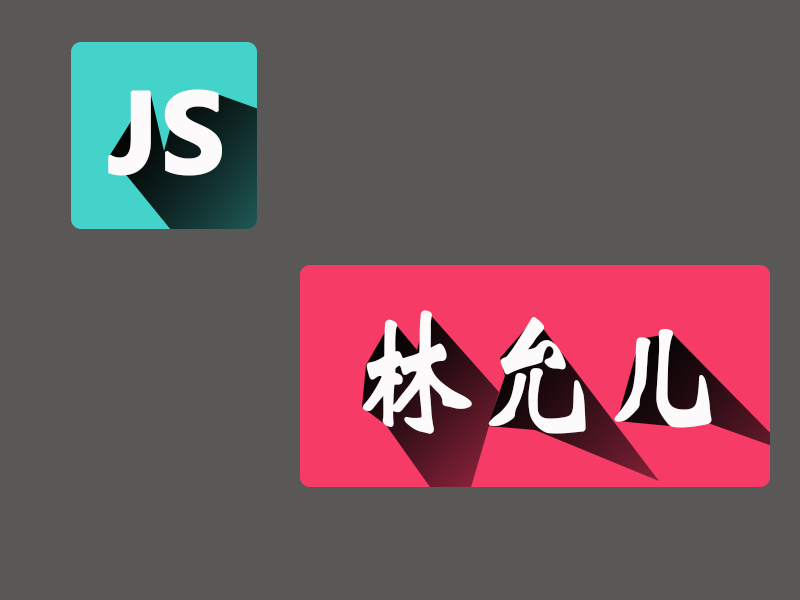
<style>
.page{position:relative;width:800px;height:600px;background:#5a5757}
.page>*{position:absolute;margin:0}
.t1{font:106.9px "MicrosoftYaHei-Bold";color:#fcfafa;text-transform:uppercase;font-weight:bold}
.t2{font:145.8px "STXinwei";color:#fcfafa;font-weight:bold;scale:0.82 1}
</style>
<div class="page">
<p class="t1" style="left:108px;top:89px;width:115px;height:87px">JS</p>
<p class="t2" style="left:362px;top:310px;width:350px;height:124px">林允儿</p>
</div>
